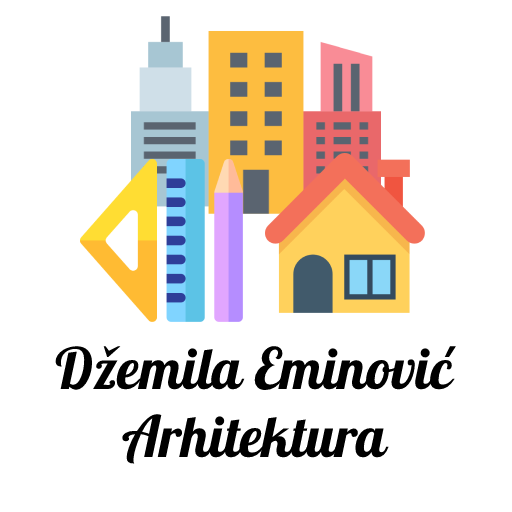
<style>
.page{position:relative;width:512px;height:512px;background:#ffffff}
.page>*{position:absolute;margin:0}
.t1{font:57px "Galada-Regular";color:#000000}
</style>
<div class="page">
<p class="t1" style="left:55px;top:346px;width:401px;height:118px;text-align:center">Džemila Eminović<br>Arhitektura</p>
</div>
